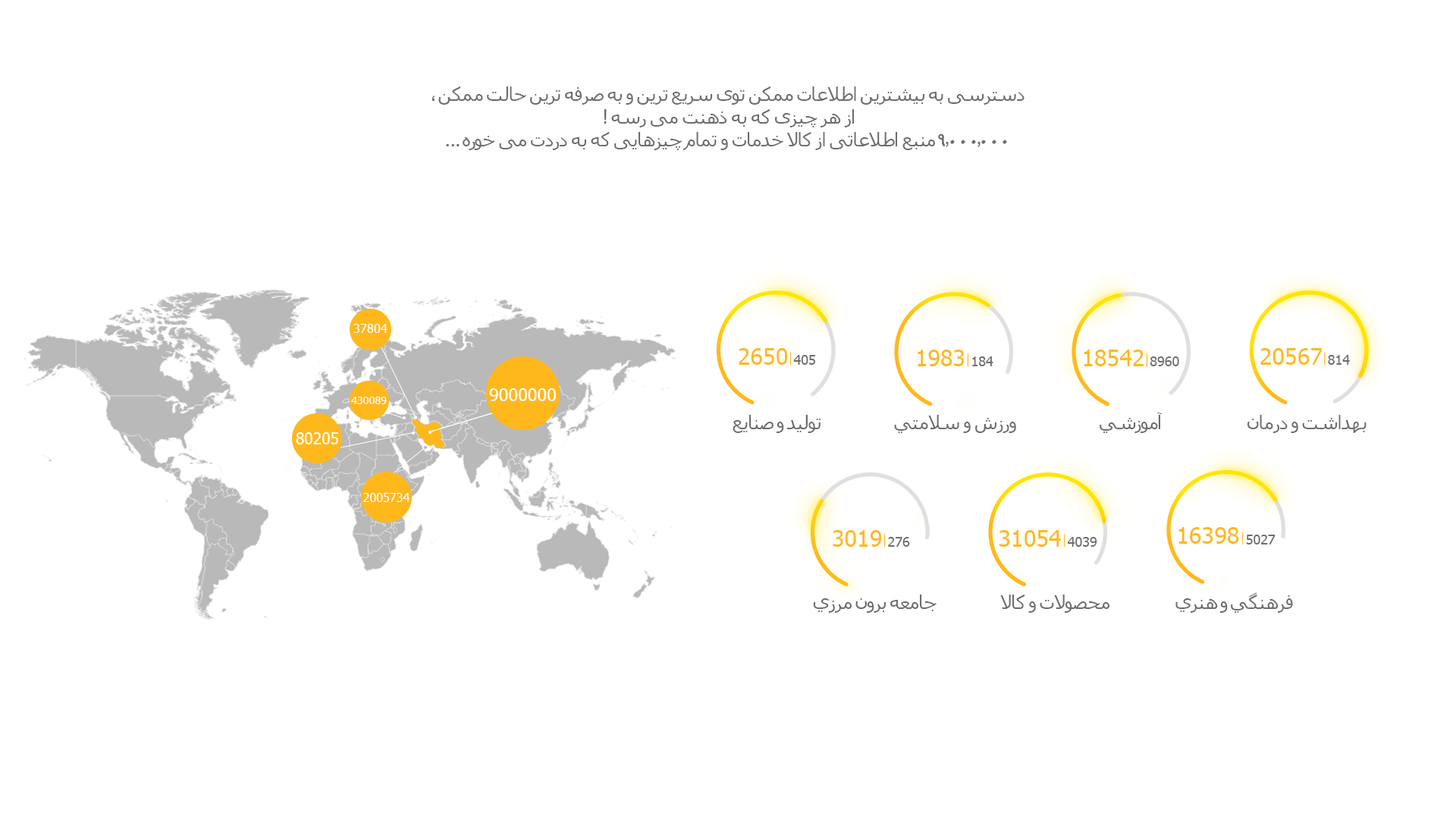
<style>
.page{position:relative;width:1456px;height:819px;background:#ffffff}
.page>*{position:absolute;margin:0}
.t1{font:19px "Tahoma";letter-spacing:-0.04em;color:#6c6d70}
.t2{font:19px "Tahoma";letter-spacing:-0.08em;color:#6c6d70}
.t3{font:29px "AMashinTahrir-Old";letter-spacing:-0.04em;color:#6c6d70}
.t4{font:12.3px "Tahoma";color:#ffffff}
.t5{font:22.8px "Tahoma";color:#ffb81c}
.t6{font:13.3px "Tahoma";color:#6c6d70}
.t7{font:17.4px "Tahoma";color:#ffffff}
.t8{font:10.7px "Tahoma";color:#ffffff}
.t9{font:15.6px "Tahoma";color:#ffffff}
.t10{font:12px "Tahoma";color:#ffffff}
</style>
<div class="page">
<p class="t1" style="left:438px;top:86px;width:586px;height:64px;text-align:center">دسترسی به بیشترین اطلاعات ممکن توی سریع ترین و به صرفه ترین حالت ممکن<br> از هر چیزی که به ذهنت می رسه<br>منبع اطلاعاتی از کالا خدمات و تمام چیزهایی که به دردت می <span class="t2">خوره</span></p>
<p class="t1" style="left:432px;top:96px;width:3px;height:5px">،</p>
<p class="t1" style="left:604px;top:109px;width:3px;height:15px">!</p>
<p class="t3" style="left:938px;top:133px;width:69px;height:14px">9000000</p>
<p class="t1" style="left:446px;top:144px;width:14px;height:2px">...</p>
<p class="t1" style="left:946px;top:142px;width:3px;height:5px;rotate:180deg">،</p>
<p class="t1" style="left:977px;top:142px;width:4px;height:5px;rotate:180deg">،</p>
<p class="t4" style="left:353px;top:324px;width:35px;height:9px">37804</p>
<p class="t5" style="left:739px;top:348px;width:49px;height:17px">2650</p>
<p class="t5" style="left:918px;top:350px;width:47px;height:16px">1983</p>
<p class="t5" style="left:1084px;top:350px;width:60px;height:16px">18542</p>
<p class="t5" style="left:1260px;top:348px;width:62px;height:17px">20567</p>
<p class="t6" style="left:793px;top:355px;width:22px;height:10px">405</p>
<p class="t6" style="left:972px;top:356px;width:21px;height:10px">184</p>
<p class="t6" style="left:1150px;top:356px;width:29px;height:10px">8960</p>
<p class="t6" style="left:1328px;top:355px;width:22px;height:10px">814</p>
<p class="t7" style="left:489px;top:388px;width:67px;height:13px">9000000</p>
<p class="t8" style="left:351px;top:397px;width:36px;height:7px">430089</p>
<p class="t1" style="left:1100px;top:413px;width:63px;height:20px">آموزشي</p>
<p class="t1" style="left:733px;top:415px;width:88px;height:18px">توليد و صنايع</p>
<p class="t1" style="left:894px;top:415px;width:122px;height:18px">ورزش و سلامتي</p>
<p class="t1" style="left:1247px;top:415px;width:119px;height:18px">بهداشت و درمان</p>
<p class="t9" style="left:296px;top:432px;width:42px;height:12px">80205</p>
<p class="t10" style="left:363px;top:493px;width:46px;height:9px">2005734</p>
<p class="t5" style="left:833px;top:530px;width:49px;height:17px">3019</p>
<p class="t5" style="left:999px;top:530px;width:62px;height:17px">31054</p>
<p class="t5" style="left:1178px;top:527px;width:61px;height:17px">16398</p>
<p class="t6" style="left:888px;top:537px;width:22px;height:10px">276</p>
<p class="t6" style="left:1068px;top:537px;width:29px;height:10px">4039</p>
<p class="t6" style="left:1246px;top:535px;width:29px;height:9px">5027</p>
<p class="t1" style="left:1175px;top:592px;width:118px;height:21px">فرهنگي و هنري</p>
<p class="t1" style="left:813px;top:595px;width:124px;height:18px">جامعه برون مرزي</p>
<p class="t1" style="left:1000px;top:595px;width:109px;height:18px">محصولات و كالا</p>
</div>
